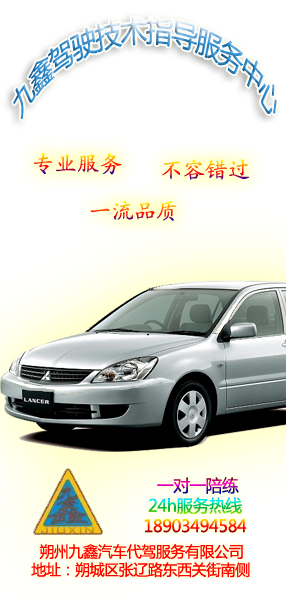
<style>
.page{position:relative;width:286px;height:605px;background:#ffffff}
.page>*{position:absolute;margin:0}
.t1{font:22.6px/30.5px "MicrosoftYaHei";letter-spacing:-0.025em}
.t2{font:23.6px "AdobeKaitiStd-Regular";letter-spacing:-0.025em}
.t3{font:17px/20.2px "MicrosoftYaHei";letter-spacing:-0.025em}
.t4{font:15.2px/18.2px "MicrosoftYaHei";letter-spacing:-0.025em;color:#ff0000}
</style>
<div class="page">
<p class="t1" style="left:13px;top:16px;width:264px;height:103px">九鑫驾驶技术指导服务中心</p>
<p class="t2" style="left:33px;top:152px;width:89px;height:23px">专业服务</p>
<p class="t2" style="left:162px;top:159px;width:88px;height:21px">不容错过</p>
<p class="t2" style="left:90px;top:201px;width:86px;height:20px">一流品质</p>
<p class="t3" style="left:144px;top:477px;width:103px;height:56px">一对一陪练<br>  24h服务热线<br> 18903494584</p>
<p class="t4" style="left:31px;top:544px;width:219px;height:34px">朔州九鑫汽车代驾服务有限公司<br>地址：朔城区张辽路东西关街南侧</p>
</div>
